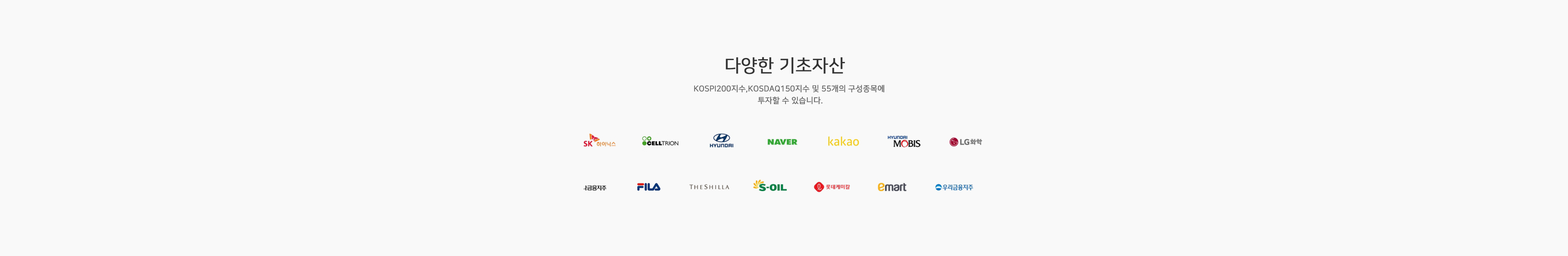
<style>
.page{position:relative;width:1568px;height:256px;background:#f9f9f9}
.page>*{position:absolute;margin:0}
.t1{font:17.6px "NanumSquareR";color:#333333;font-weight:bold}
.t2{font:7.8px/11.8px "NanumSquareR";color:#666666;font-weight:bold}
</style>
<div class="page">
<p class="t1" style="left:726px;top:57px;width:119px;height:17px">다양한 기초자산</p>
<p class="t2" style="left:694px;top:85px;width:190px;height:19px;text-align:center">KOSPI200지수,KOSDAQ150지수 및 55개의 구성종목에 <br>투자할 수 있습니다.</p>
</div>
